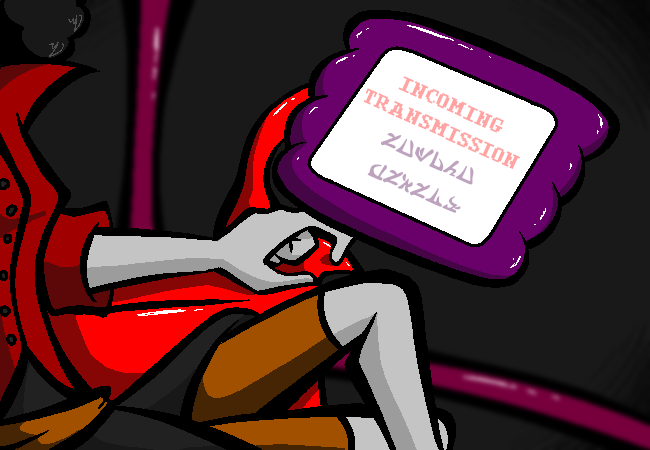
<style>
.page{position:relative;width:650px;height:450px;background:#191919}
.page>*{position:absolute;margin:0}
.t1{font:22px "Homestuck-Regular"}
.t2{font:28px "HiveswapAlternian-Regular"}
</style>
<div class="page">
<p class="t1" style="left:363px;top:76px;width:157px;height:137px;text-align:center;rotate:24deg">INCOMING<br>TRANSMISSION<br><span class="t2">EDMOND<br>WEVERA</span></p>
</div>
